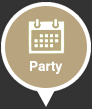
<style>
.page{position:relative;width:92px;height:109px;background:#b8a57f}
.page>*{position:absolute;margin:0}
.t1{font:14px "Roboto-Bold";color:#feffff}
</style>
<div class="page">
<p class="t1" style="left:30px;top:61px;width:33px;height:13px">Party</p>
</div>
